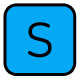
<style>
.page{position:relative;width:80px;height:80px;background:#03a9f4}
.page>*{position:absolute;margin:0}
.t1{font:48px "NanumSquareRoundR";color:#000000}
</style>
<div class="page">
<p class="t1" style="left:28px;top:22px;width:24px;height:36px">S</p>
</div>
